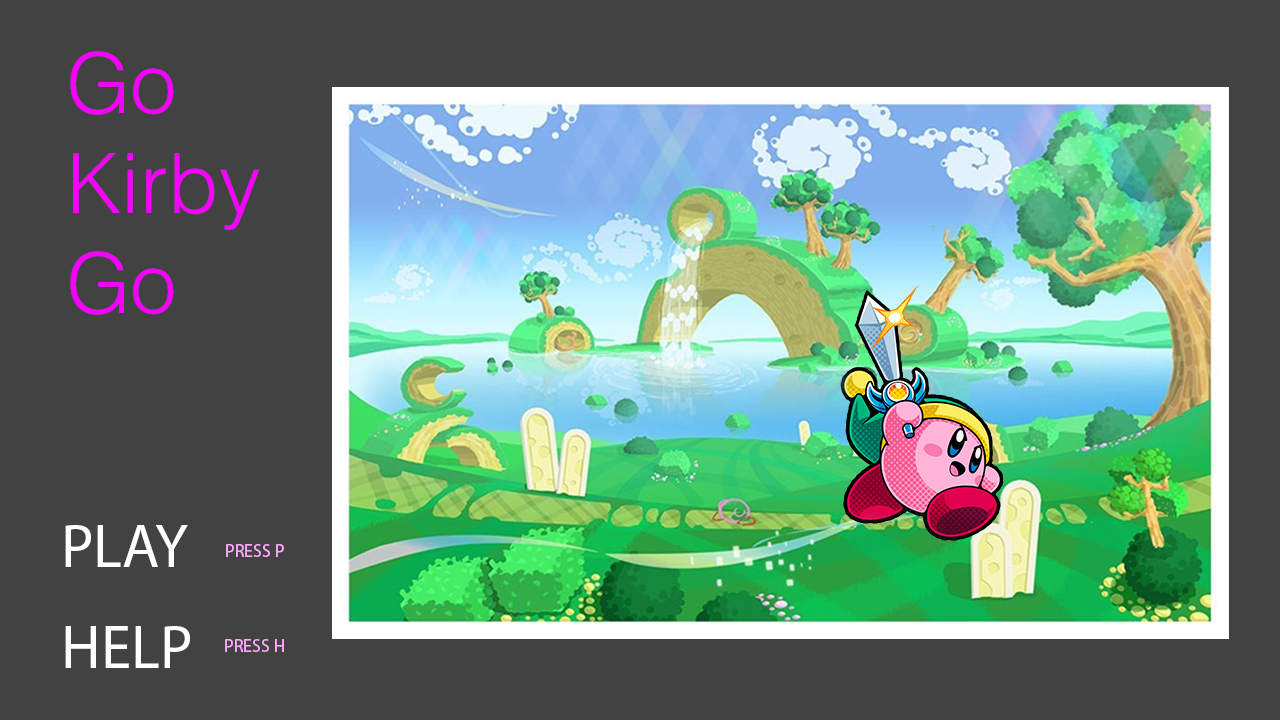
<style>
.page{position:relative;width:1280px;height:720px;background:#424242}
.page>*{position:absolute;margin:0}
.t1{font:83.4px "Helvetica-Light";color:#f600ff}
.t2{font:61px "MyriadPro-Regular";color:#ffffff}
.t3{font:18px "MyriadPro-Regular";color:#fca8ff}
</style>
<div class="page">
<p class="t1" style="left:70px;top:51px;width:190px;height:264px">Go <br>Kirby <br>Go</p>
<p class="t2" style="left:65px;top:525px;width:123px;height:42px">PLAY</p>
<p class="t3" style="left:226px;top:544px;width:58px;height:13px">PRESS P</p>
<p class="t2" style="left:65px;top:626px;width:125px;height:42px">HELP</p>
<p class="t3" style="left:225px;top:639px;width:59px;height:13px">PRESS H</p>
</div>
